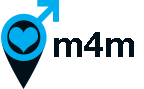
<style>
.page{position:relative;width:144px;height:89px;background:#ffffff}
.page>*{position:absolute;margin:0}
.t1{font:36px "HelveticaNeue-Bold";color:#011019}
</style>
<div class="page">
<p class="t1" style="left:54px;top:32px;width:80px;height:25px">m4m</p>
</div>
